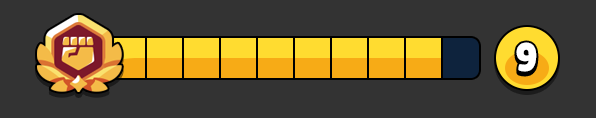
<style>
.page{position:relative;width:596px;height:118px;background:#333333}
.page>*{position:absolute;margin:0}
.t1{font:40px "LilitaOne";color:#ffffff;text-transform:uppercase}
</style>
<div class="page">
<p class="t1" style="left:516px;top:42px;width:21px;height:30px">9</p>
</div>
